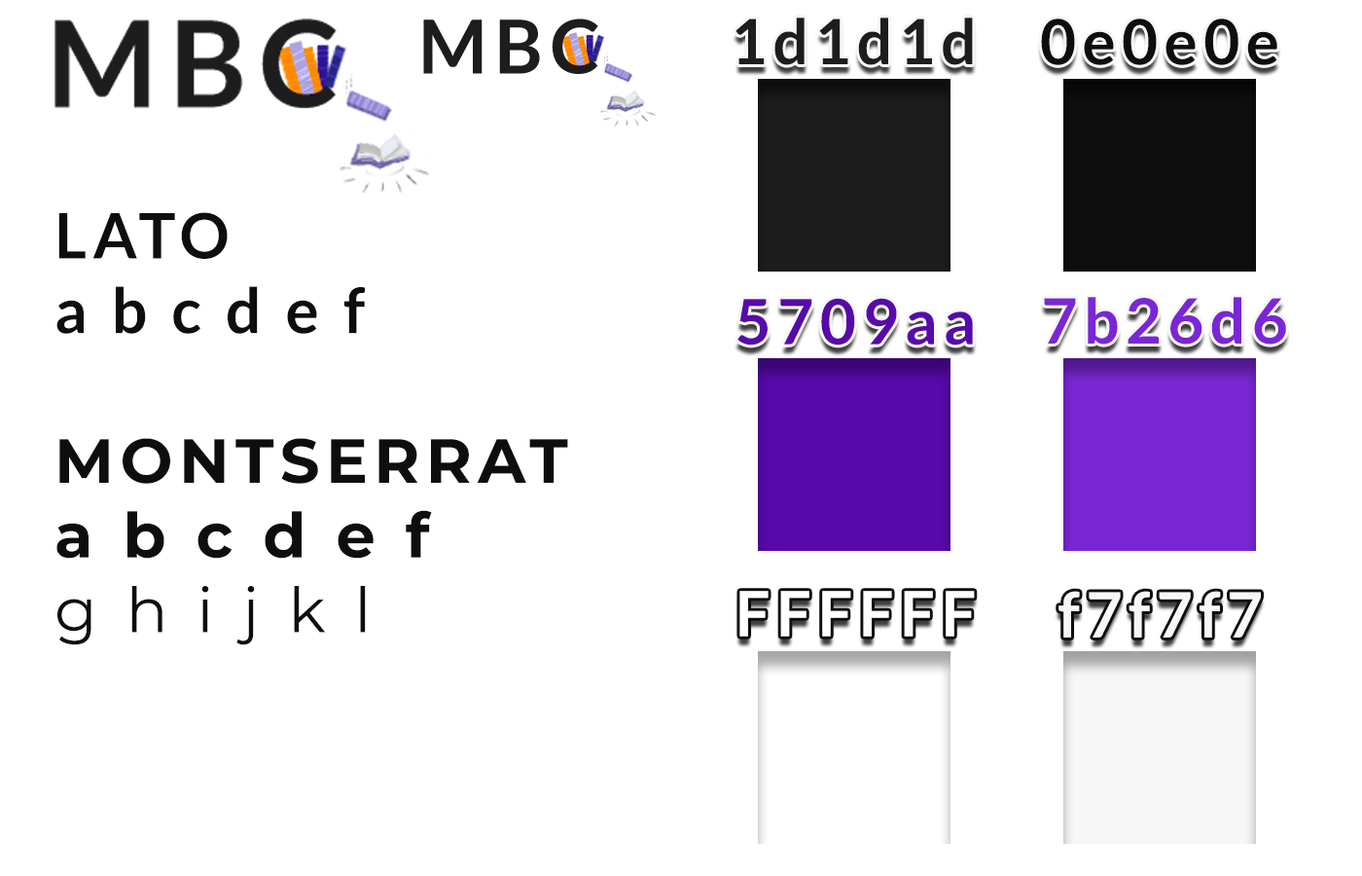
<style>
.page{position:relative;width:1362px;height:876px;background:#ffffff}
.page>*{position:absolute;margin:0}
.t1{font:62.3px "Lato-Bold";letter-spacing:0.1em;color:#1d1d1d}
.t2{font:62.3px "Lato-Bold";letter-spacing:0.1em;color:#0e0e0e}
.t3{font:62.3px "Montserrat-Bold";letter-spacing:0.1em;color:#0e0e0e}
.t4{font:62.3px "Montserrat-Regular";letter-spacing:0.1em;color:#0e0e0e}
.t5{font:62.3px "Lato-Bold";letter-spacing:0.1em;color:#5709aa}
.t6{font:62.3px "Lato-Bold";letter-spacing:0.1em;color:#7b26d6}
.t7{font:62.3px "Lato-Bold";letter-spacing:0.1em;color:#ffffff}
.t8{font:62.3px "Lato-Bold";letter-spacing:0.1em;color:#f7f7f7}
</style>
<div class="page">
<p class="t1" style="left:735px;top:18px;width:238px;height:47px">1d1d1d</p>
<p class="t2" style="left:1041px;top:18px;width:236px;height:47px">0e0e0e</p>
<p class="t3" style="left:56px;top:212px;width:512px;height:433px"><span class="t2">LATO<br>a b c d e f<br><br></span>MONTSERRAT<br>a b c d e f<br><span class="t4">g h i j k l</span></p>
<p class="t5" style="left:737px;top:298px;width:236px;height:47px">5709aa</p>
<p class="t6" style="left:1044px;top:297px;width:242px;height:47px">7b26d6</p>
<p class="t7" style="left:739px;top:591px;width:236px;height:45px">FFFFFF</p>
<p class="t8" style="left:1058px;top:591px;width:203px;height:46px">f7f7f7</p>
</div>
